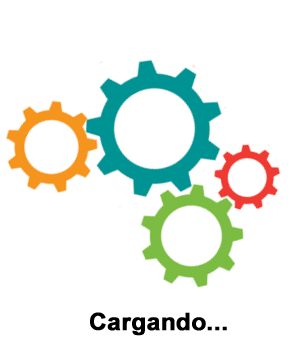
<style>
.page{position:relative;width:300px;height:346px;background:#ffffff}
.page>*{position:absolute;margin:0}
.t1{font:24px "Arial-BoldMT";color:#000000;font-weight:bold}
</style>
<div class="page">
<p class="t1" style="left:90px;top:312px;width:137px;height:24px">Cargando...</p>
</div>
